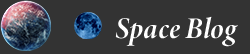
<style>
.page{position:relative;width:250px;height:54px;background:#333333}
.page>*{position:absolute;margin:0}
.t1{font:30px "MinionConceptItalic-DisplayBoldItalic";color:#ffffff}
</style>
<div class="page">
<p class="t1" style="left:115px;top:16px;width:123px;height:31px">Space Blog</p>
</div>
